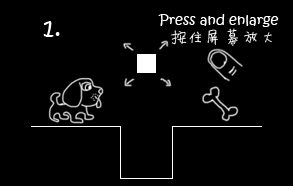
<style>
.page{position:relative;width:293px;height:186px;background:#000000}
.page>*{position:absolute;margin:0}
.t1{font:14px "KristenITC-Regular";color:#fefefe}
.t2{font:24px "KristenITC-Regular";color:#ffffff}
.t3{font:18px "Li-Xuke-Comic-Font";color:#fefefe}
</style>
<div class="page">
<p class="t1" style="left:158px;top:14px;width:121px;height:13px">Press and enlarge</p>
<p class="t2" style="left:43px;top:21px;width:17px;height:16px">1.</p>
<p class="t3" style="left:171px;top:28px;width:101px;height:18px">按住屏幕放大</p>
</div>
